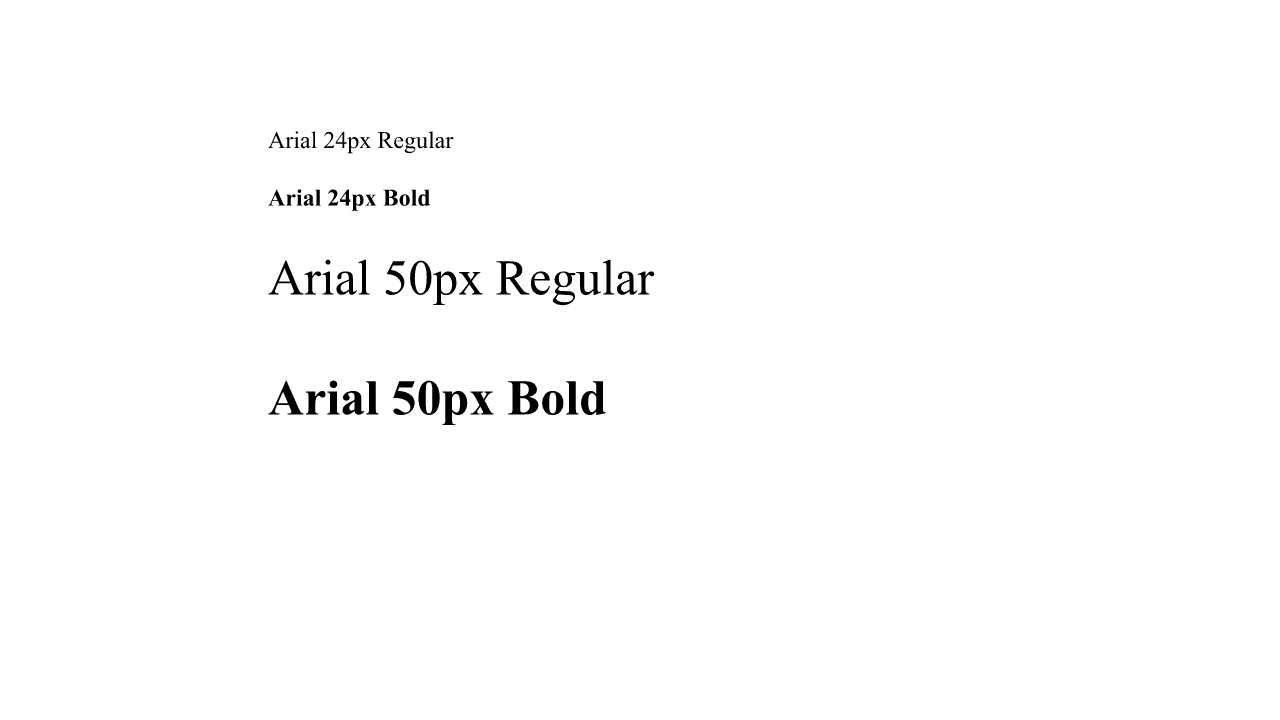
<style>
.page{position:relative;width:1280px;height:720px;background:#ffffff}
.page>*{position:absolute;margin:0}
.t1{font:24px "TimesNewRomanPSMT";color:#000000}
.t2{font:24px "TimesNewRomanPS-BoldMT";color:#000000}
.t3{font:50px "TimesNewRomanPSMT";color:#000000}
.t4{font:50px "TimesNewRomanPS-BoldMT";color:#000000}
</style>
<div class="page">
<p class="t1" style="left:268px;top:131px;width:387px;height:295px">Arial 24px Regular<br><br><span class="t2">Arial 24px Bold<br><br></span><span class="t3">Arial 50px Regular<br><br></span><span class="t4">Arial 50px Bold</span></p>
</div>
